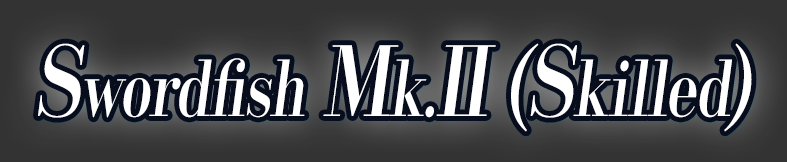
<style>
.page{position:relative;width:787px;height:162px}
.page>*{position:absolute;margin:0}
.t1{font:76.8px "KochoStd-Heavy";letter-spacing:-0.02em;color:#ffffff;font-style:italic;scale:0.75 1}
.t2{font:96px "KochoStd-Heavy";letter-spacing:-0.02em;color:#ffffff;font-style:italic;scale:0.75 1}
</style>
<div class="page">
<p class="t1" style="left:38px;top:43px;width:714px;height:89px"><span class="t2">S</span>wordfish <span class="t2">M</span>k.<span class="t2">II (S</span>killed<span class="t2">)</span></p>
</div>
